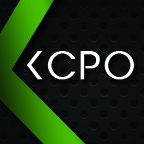
<style>
.page{position:relative;width:144px;height:144px}
.page>*{position:absolute;margin:0}
.t1{font:36.6px "DevilBreezeBook";letter-spacing:0.1em;color:#ffffff;font-weight:bold}
</style>
<div class="page">
<p class="t1" style="left:27px;top:51px;width:107px;height:29px">KCPO</p>
</div>
